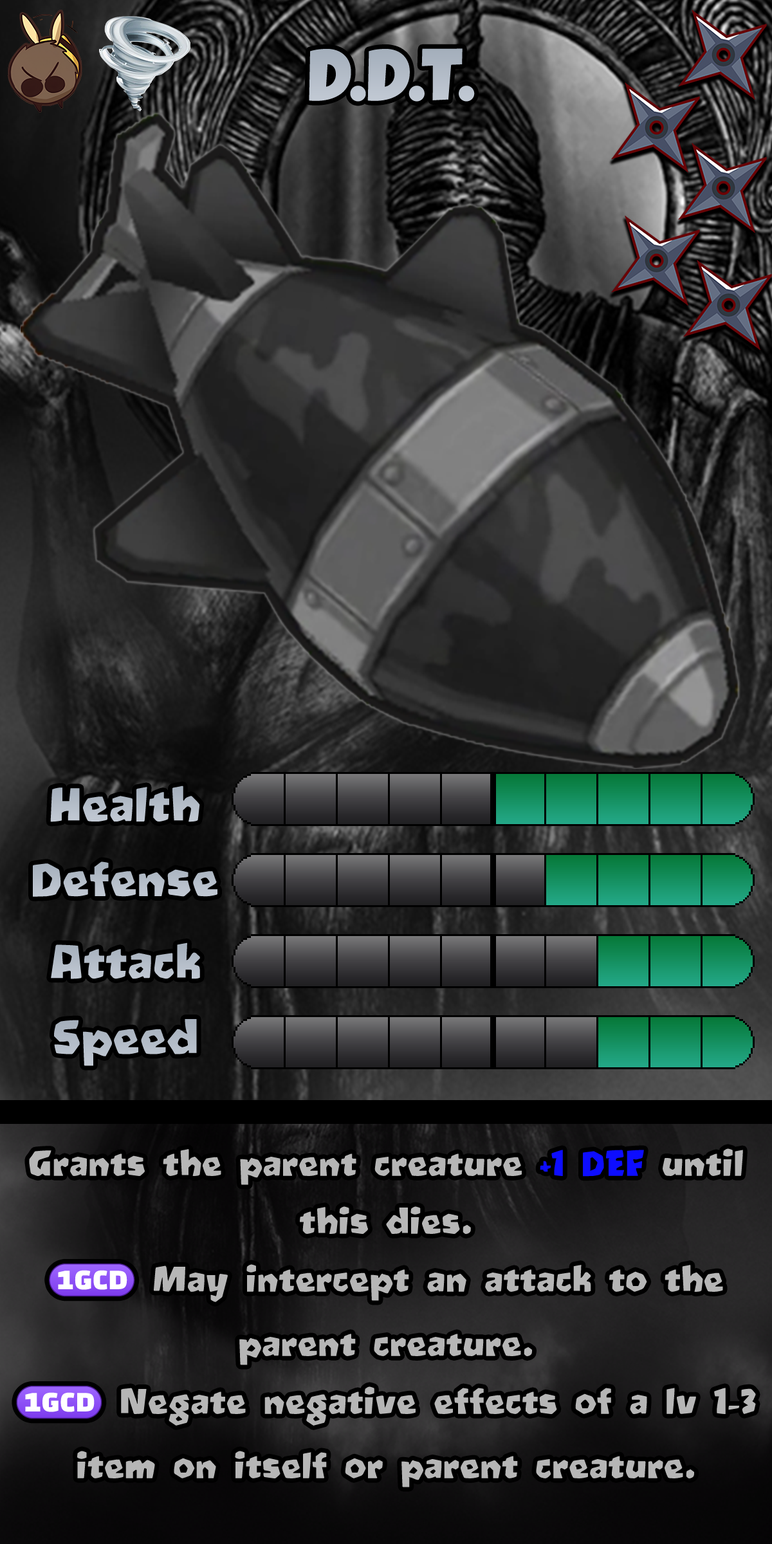
<style>
.page{position:relative;width:772px;height:1544px}
.page>*{position:absolute;margin:0}
.t1{font:128.7px "LuckiestGuy-Regular";color:#b3bcc7}
.t2{font:77.2px "Oetztype";color:#b5beca}
.t3{font:77.2px "Oetztype";color:#b7bfca}
.t4{font:77.2px "Oetztype";color:#b5bec9}
.t5{font:77.2px "Oetztype";color:#b2bbc7}
.t6{font:57.9px/57.9px "Oetztype";color:#b6b6b6}
.t7{font:57.9px/57.9px "Oetztype";color:#0d0dff}
.t8{font:57.9px/57.9px "stoogedings-Regular";color:#b6b6b6}
.t9{font:57.9px/64.3px "Oetztype";color:#b6b6b6}
</style>
<div class="page">
<p class="t1" style="left:309px;top:48px;width:166px;height:54px">D.D.T.</p>
<p class="t2" style="left:50px;top:786px;width:150px;height:36px">Health</p>
<p class="t3" style="left:33px;top:862px;width:184px;height:35px">Defense</p>
<p class="t4" style="left:51px;top:943px;width:149px;height:36px">Attack</p>
<p class="t5" style="left:54px;top:1019px;width:143px;height:47px">Speed</p>
<p class="t6" style="left:16px;top:1149px;width:740px;height:339px;text-align:center">Grants the parent creature <span class="t7">+1 DEF </span>until this dies.<br><span class="t8">(1GCD)</span> May intercept an attack to the <span class="t9">parent creature</span>.<br><span class="t8">(1GCD)</span> Negate negative effects of a lv 1-3 item on itself or <span class="t9">parent creature</span>.</p>
</div>
